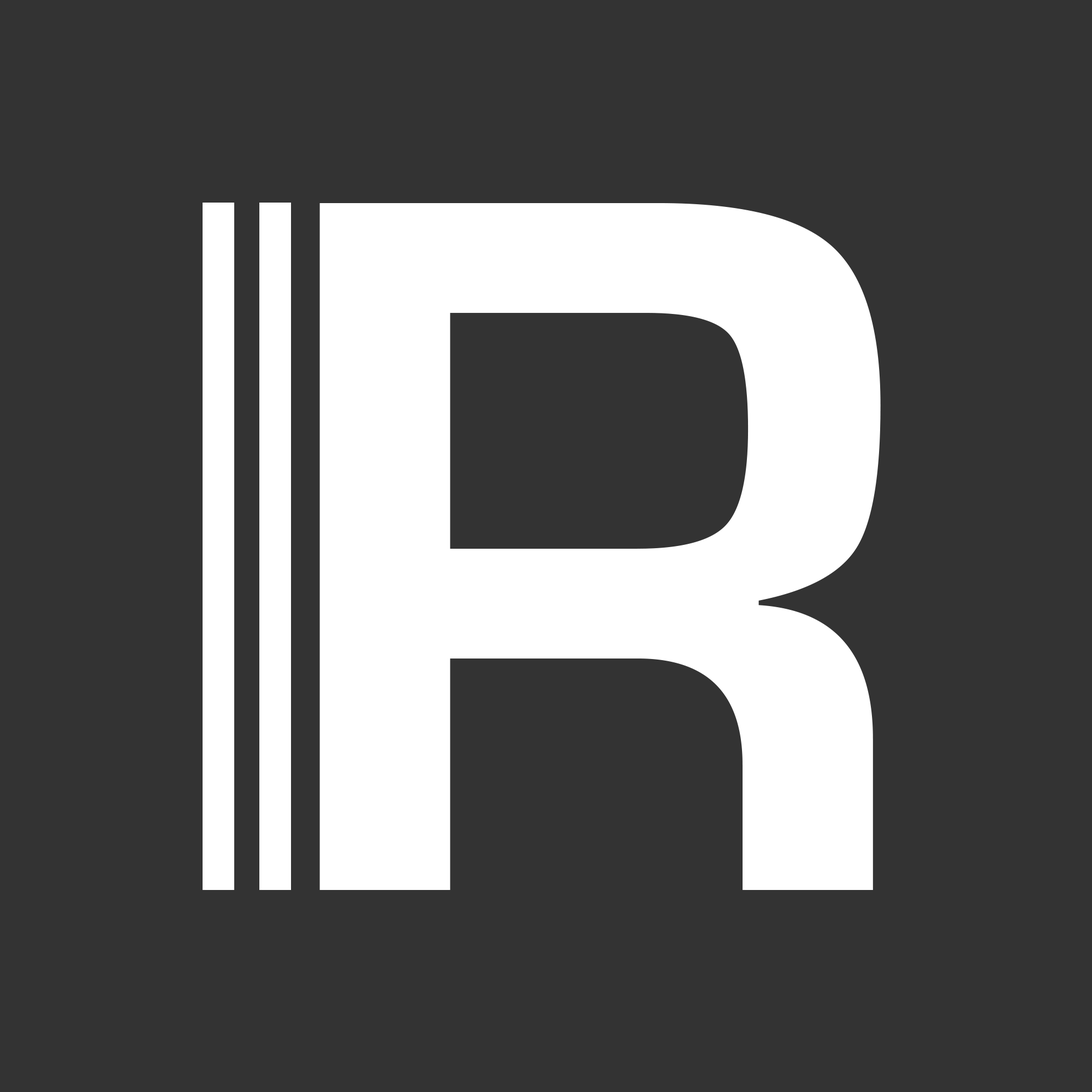
<style>
.page{position:relative;width:1092px;height:1092px;background:#333333}
.page>*{position:absolute;margin:0}
.t1{font:1030.9px "EurostileBold";color:#ffffff}
</style>
<div class="page">
<p class="t1" style="left:319px;top:203px;width:562px;height:687px">R</p>
</div>
